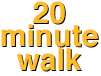
<style>
.page{position:relative;width:101px;height:76px;background:#ffffff}
.page>*{position:absolute;margin:0}
.t1{font:30px/23.3px "Helvetica-Bold";color:#fdba2b}
.t2{font:30px/23.3px "Helvetica-Bold"}
</style>
<div class="page">
<p class="t1" style="left:1px;top:1px;width:97px;height:70px;text-align:center">20<br>minute<br>walk</p>
<p class="t2" style="left:2px;top:2px;width:97px;height:70px;text-align:center">20<br>minute<br>walk</p>
</div>
